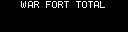
<style>
.page{position:relative;width:128px;height:32px;background:#000000}
.page>*{position:absolute;margin:0}
.t1{font:10px "Terminal";letter-spacing:-0.125em;color:#ffffff}
</style>
<div class="page">
<p class="t1" style="left:21px;top:1px;width:48px;height:7px">WAR FORT</p>
</div>
